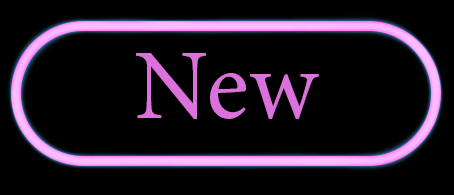
<style>
.page{position:relative;width:454px;height:195px;background:#000000}
.page>*{position:absolute;margin:0}
.t1{font:100px "MinionPro-Regular";color:#db72db}
</style>
<div class="page">
<p class="t1" style="left:136px;top:53px;width:183px;height:66px">New Game</p>
</div>
